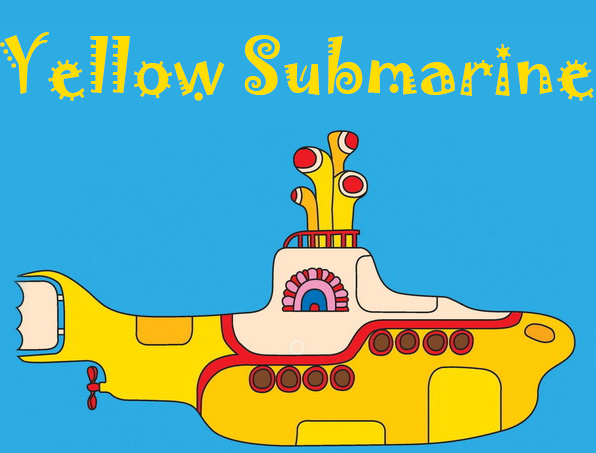
<style>
.page{position:relative;width:596px;height:453px;background:#2dace3}
.page>*{position:absolute;margin:0}
.t1{font:68px "Jokerman-Regular";color:#ffdd00}
</style>
<div class="page">
<p class="t1" style="left:0px;top:32px;width:594px;height:69px">Yellow Submarine</p>
</div>
